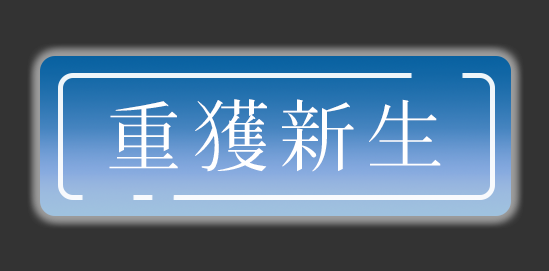
<style>
.page{position:relative;width:549px;height:271px;background:#333333}
.page>*{position:absolute;margin:0}
.t1{font:77.8px "HanaMinA";letter-spacing:0.12em;color:#ffffff}
</style>
<div class="page">
<p class="t1" style="left:109px;top:99px;width:332px;height:73px">重獲新生</p>
</div>
